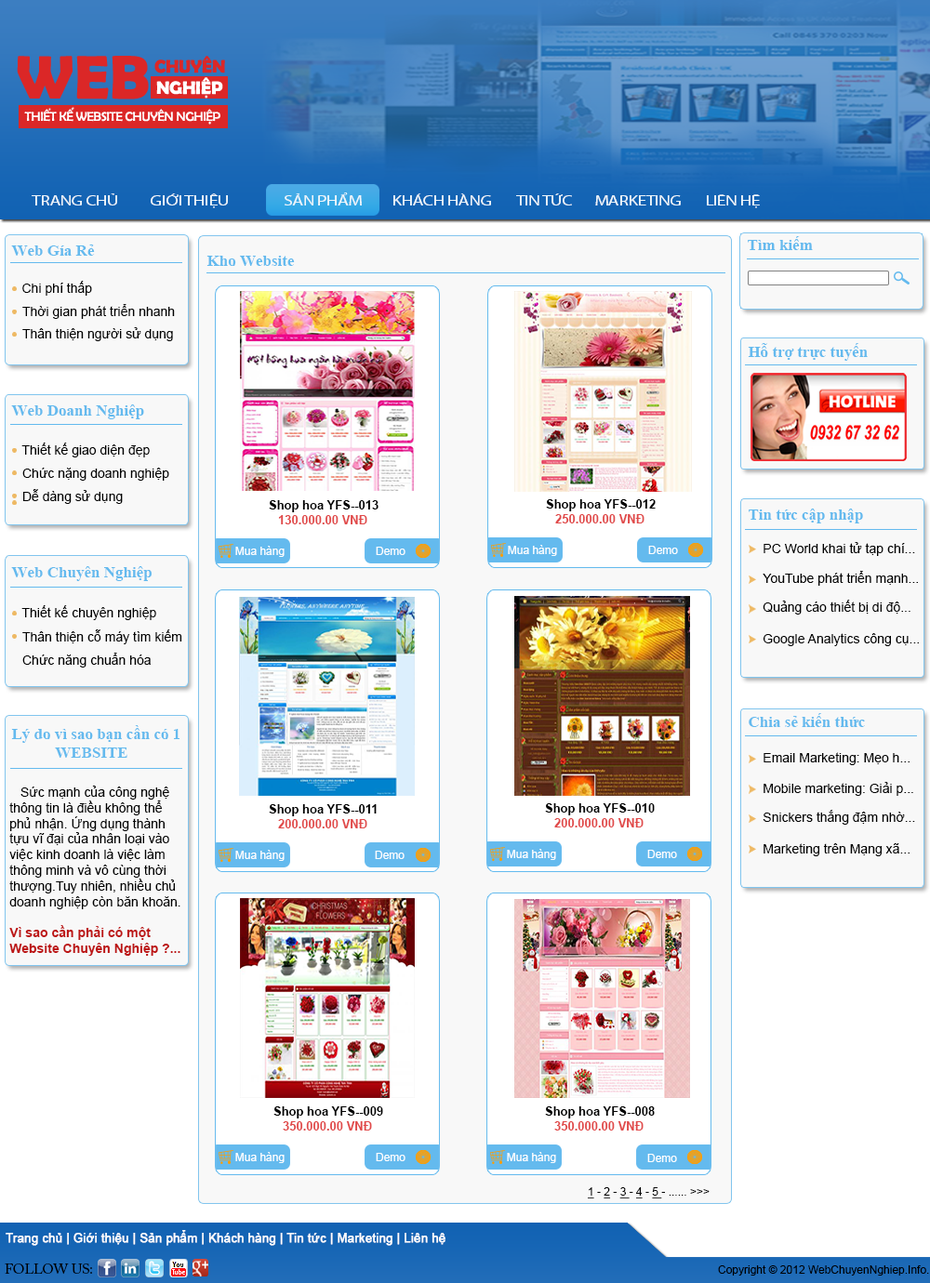
<style>
.page{position:relative;width:930px;height:1283px;background:#ffffff}
.page>*{position:absolute;margin:0}
.t1{font:13.9px "MyriadPro-Regular";letter-spacing:-0.05em;color:#eef6fb;text-transform:uppercase;scale:1.3 1}
.t2{font:13.9px "MyriadPro-Regular";letter-spacing:-0.05em;color:#eef6fb;text-transform:uppercase;scale:1.35 1}
.t3{font:16.1px "TimesNewRomanPS-BoldMT";color:#64baee}
.t4{font:15.8px "TimesNewRomanPS-BoldMT";color:#64baee}
.t5{font:13.3px "ArialMT";color:#000000}
.t6{font:12.1px "Arial-BoldMT";color:#000000}
.t7{font:12.1px "Arial-BoldMT";color:#e14a4a}
.t8{font:11.2px "ArialMT";color:#ffffff}
.t9{font:13px "ArialMT";color:#000000}
.t10{font:13px "Arial-BoldMT";color:#bd1515}
.t11{font:11.2px "ArialMT";color:#000000}
.t12{font:11.2px "ArialMT";color:#000000;text-decoration:underline}
.t13{font:12.1px "ArialMT";color:#ffffff;font-weight:bold}
.t14{font:13.9px "ACaslonPro-Regular";color:#000000}
</style>
<div class="page">
<p class="t1" style="left:32px;top:193px;width:85px;height:12px">trang chủ</p>
<p class="t2" style="left:151px;top:193px;width:77px;height:15px">GIỚI THIỆU</p>
<p class="t1" style="left:284px;top:192px;width:78px;height:13px">Sản phẩm</p>
<p class="t1" style="left:393px;top:193px;width:98px;height:12px">kHÁCH HÀNG</p>
<p class="t1" style="left:516px;top:193px;width:56px;height:12px">TIN TỨC</p>
<p class="t1" style="left:595px;top:195px;width:85px;height:10px">marketing</p>
<p class="t1" style="left:706px;top:194px;width:53px;height:14px">lIÊN HỆ</p>
<p class="t3" style="left:11px;top:244px;width:84px;height:12px">Web Gía Rẻ</p>
<p class="t4" style="left:747px;top:236px;width:65px;height:14px">Tìm kiếm</p>
<p class="t3" style="left:206px;top:256px;width:89px;height:10px">Kho Website</p>
<p class="t5" style="left:22px;top:281px;width:70px;height:15px">Chi phí thấp</p>
<p class="t5" style="left:22px;top:304px;width:153px;height:15px">Thời gian phát triển nhanh</p>
<p class="t5" style="left:22px;top:327px;width:151px;height:14px">Thân thiện người sử dụng</p>
<p class="t3" style="left:747px;top:343px;width:120px;height:18px">Hỗ trợ trực tuyến</p>
<p class="t3" style="left:11px;top:404px;width:133px;height:15px">Web Doanh Nghiệp</p>
<p class="t5" style="left:21px;top:442px;width:129px;height:15px">Thiết kế giao diện đẹp</p>
<p class="t5" style="left:22px;top:468px;width:147px;height:13px">Chức nặng doanh nghiệp</p>
<p class="t5" style="left:23px;top:489px;width:100px;height:15px">Dễ dàng sử dụng</p>
<p class="t6" style="left:269px;top:500px;width:109px;height:12px">Shop hoa YFS--013</p>
<p class="t6" style="left:546px;top:499px;width:109px;height:12px">Shop hoa YFS--012</p>
<p class="t3" style="left:748px;top:508px;width:115px;height:15px">Tin tức cập nhập</p>
<p class="t7" style="left:278px;top:515px;width:89px;height:9px">130.000.00 VNĐ</p>
<p class="t7" style="left:555px;top:514px;width:89px;height:9px">250.000.00 VNĐ</p>
<p class="t8" style="left:235px;top:546px;width:49px;height:11px">Mua hàng</p>
<p class="t8" style="left:508px;top:545px;width:49px;height:11px">Mua hàng</p>
<p class="t8" style="left:648px;top:546px;width:30px;height:8px">Demo</p>
<p class="t5" style="left:763px;top:542px;width:152px;height:14px">PC World khai tử tạp chí...</p>
<p class="t8" style="left:376px;top:547px;width:29px;height:8px">Demo</p>
<p class="t3" style="left:11px;top:566px;width:141px;height:15px">Web Chuyên Nghiệp</p>
<p class="t5" style="left:762px;top:571px;width:155px;height:15px">YouTube phát triển mạnh...</p>
<p class="t5" style="left:21px;top:605px;width:135px;height:15px">Thiết kế chuyên nghiệp</p>
<p class="t5" style="left:762px;top:600px;width:148px;height:14px">Quảng cáo thiết bị di độ...</p>
<p class="t5" style="left:22px;top:629px;width:160px;height:15px">Thân thiện cỗ máy tìm kiếm</p>
<p class="t5" style="left:762px;top:633px;width:156px;height:13px">Google Analytics công cụ...</p>
<p class="t5" style="left:22px;top:653px;width:129px;height:14px">Chức năng chuẩn hóa</p>
<p class="t3" style="left:748px;top:713px;width:116px;height:14px">Chia sẻ kiến thức</p>
<p class="t3" style="left:11px;top:725px;width:168px;height:33px">Lý do vì sao bạn cần có 1<br>           WEBSITE</p>
<p class="t5" style="left:763px;top:752px;width:146px;height:13px">Email Marketing: Mẹo h...</p>
<p class="t9" style="left:9px;top:785px;width:171px;height:171px">Sức mạnh của công nghệ<br>thông tin là điều không thể<br>phủ nhận. Ứng dụng thành<br>tựu vĩ đại của nhân loại vào<br>việc kinh doanh là việc làm<br>thông minh và vô cùng thời<br>thượng.Tuy nhiên, nhiều chủ<br>doanh nghiệp còn băn khoăn.<br><br><span class="t10">Vì sao cần phải có một<br>Website Chuyên Nghiệp ?...</span></p>
<p class="t5" style="left:763px;top:782px;width:150px;height:14px">Mobile marketing: Giải p...</p>
<p class="t6" style="left:269px;top:804px;width:107px;height:12px">Shop hoa YFS--011</p>
<p class="t6" style="left:545px;top:803px;width:109px;height:12px">Shop hoa YFS--010</p>
<p class="t5" style="left:762px;top:810px;width:153px;height:15px">Snickers thắng đậm nhờ...</p>
<p class="t7" style="left:278px;top:819px;width:89px;height:9px">200.000.00 VNĐ</p>
<p class="t7" style="left:554px;top:818px;width:89px;height:9px">200.000.00 VNĐ</p>
<p class="t5" style="left:763px;top:843px;width:146px;height:13px">Marketing trên Mạng xã...</p>
<p class="t8" style="left:235px;top:850px;width:49px;height:11px">Mua hàng</p>
<p class="t8" style="left:375px;top:851px;width:29px;height:8px">Demo</p>
<p class="t8" style="left:507px;top:849px;width:49px;height:11px">Mua hàng</p>
<p class="t8" style="left:647px;top:850px;width:30px;height:8px">Demo</p>
<p class="t6" style="left:273px;top:1106px;width:110px;height:12px">Shop hoa YFS--009</p>
<p class="t6" style="left:545px;top:1106px;width:109px;height:12px">Shop hoa YFS--008</p>
<p class="t7" style="left:283px;top:1121px;width:89px;height:9px">350.000.00 VNĐ</p>
<p class="t7" style="left:554px;top:1121px;width:89px;height:9px">350.000.00 VNĐ</p>
<p class="t8" style="left:235px;top:1152px;width:49px;height:11px">Mua hàng</p>
<p class="t8" style="left:376px;top:1153px;width:29px;height:8px">Demo</p>
<p class="t8" style="left:507px;top:1152px;width:49px;height:11px">Mua hàng</p>
<p class="t8" style="left:647px;top:1154px;width:30px;height:8px">Demo</p>
<p class="t11" style="left:587px;top:1187px;width:122px;height:12px"><span class="t12">1</span> - <span class="t12">2</span> - <span class="t12">3 </span>- <span class="t12">4</span> - <span class="t12">5 </span>- ...... &gt;&gt;&gt;</p>
<p class="t13" style="left:6px;top:1230px;width:439px;height:16px">Trang chủ | Giới thiệu | Sản phẩm | Khách hàng | Tin tức | Marketing | Liên hệ</p>
<p class="t14" style="left:5px;top:1263px;width:87px;height:11px">FOLLOW US:</p>
<p class="t11" style="left:718px;top:1265px;width:211px;height:10px">Copyright © 2012 WebChuyenNghiep.Info.</p>
</div>
